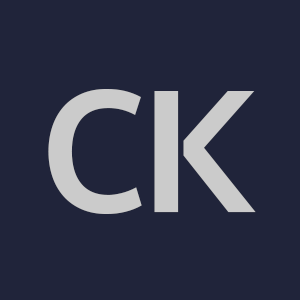
<style>
.page{position:relative;width:300px;height:300px;background:#20243a}
.page>*{position:absolute;margin:0}
.t1{font:180px "SukhumvitSet-Bold";letter-spacing:-0.025em;color:#cbcbcb}
</style>
<div class="page">
<p class="t1" style="left:48px;top:89px;width:208px;height:125px">CK</p>
</div>
